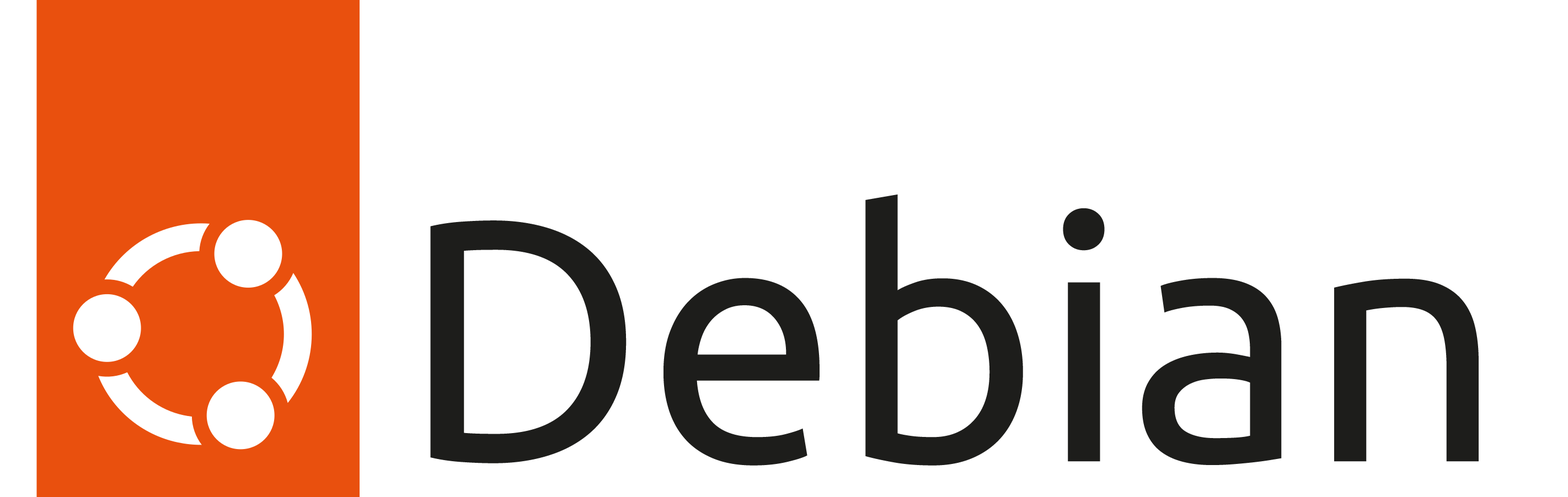
<style>
.page{position:relative;width:1568px;height:497px;background:#ffffff}
.page>*{position:absolute;margin:0}
.t1{font:344.1px "Ubuntu";color:#1d1d1b}
</style>
<div class="page">
<p class="t1" style="left:430px;top:195px;width:1049px;height:271px">Debian</p>
</div>
